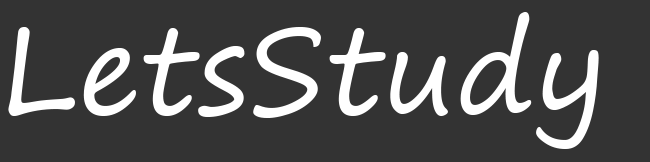
<style>
.page{position:relative;width:650px;height:162px;background:#333333}
.page>*{position:absolute;margin:0}
.t1{font:120px "SegoePrint";color:#ffffff}
</style>
<div class="page">
<p class="t1" style="left:8px;top:12px;width:591px;height:137px">LetsStudy</p>
</div>
